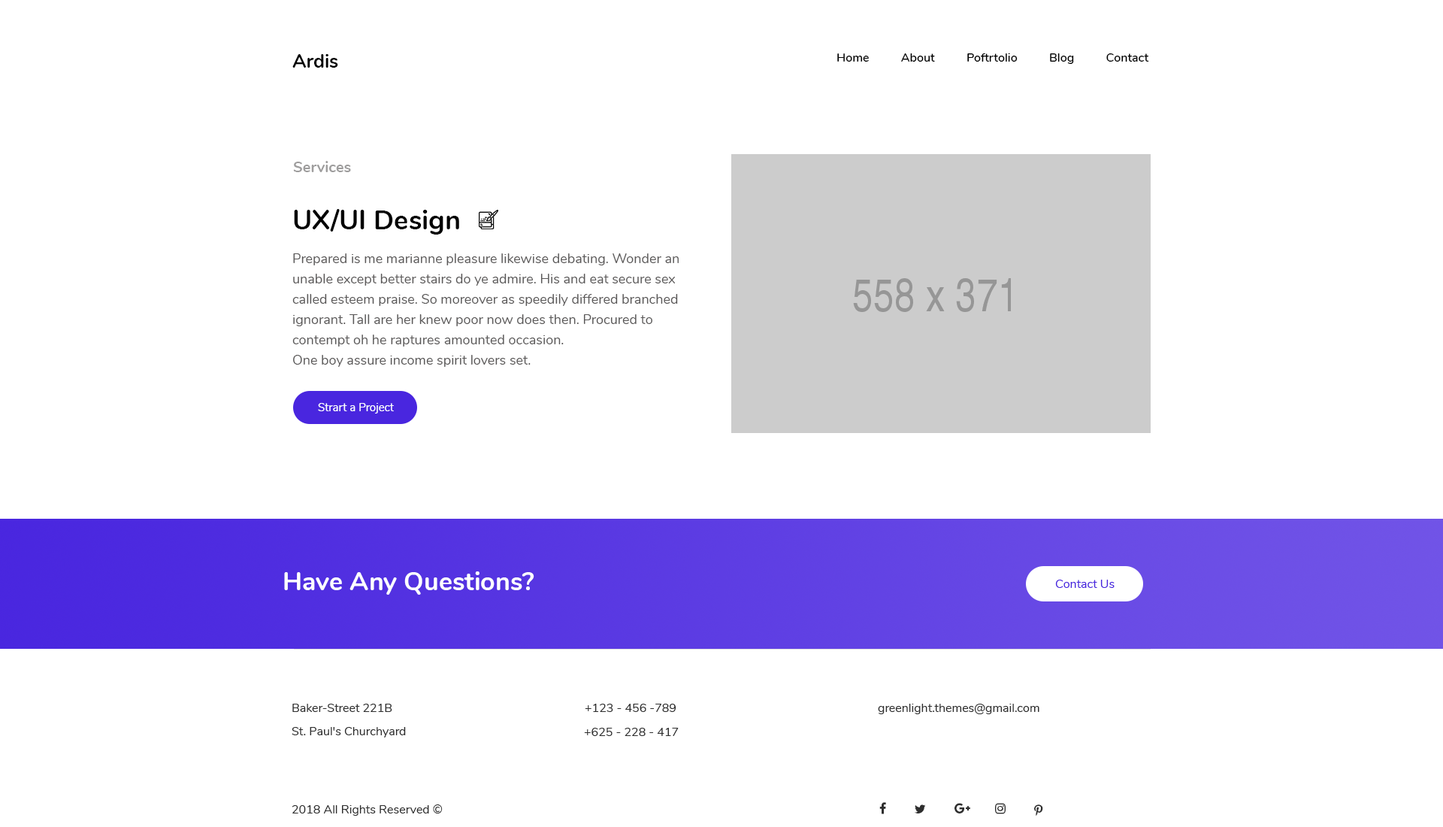
<style>
.page{position:relative;width:1443px;height:827px;background:#ffffff}
.page>*{position:absolute;margin:0}
.t1{font:12px "Nunito-SemiBold";color:#000000}
.t2{font:18.8px "Nunito-Bold";color:#010101}
.t3{font:15px "Nunito-Bold";color:#9e9d9d}
.t4{font:27.1px "Nunito-Bold";color:#000000}
.t5{font:13.5px/20.3px "Nunito-Regular";color:#5a5858}
.t6{font:11.3px "Nunito-Regular";color:#ffffff}
.t7{font:25.5px "Nunito-Bold";color:#ffffff}
.t8{font:12px "Nunito-Regular";color:#4926df}
.t9{font:12px "Nunito-Regular";color:#2e2e2e}
</style>
<div class="page">
<p class="t1" style="left:837px;top:53px;width:312px;height:11px">Home          About          Poftrtolio          Blog          Contact</p>
<p class="t2" style="left:292px;top:54px;width:46px;height:14px">Ardis</p>
<p class="t3" style="left:293px;top:161px;width:58px;height:11px">Services</p>
<p class="t4" style="left:294px;top:209px;width:165px;height:25px">UX/UI Design</p>
<p class="t5" style="left:292px;top:253px;width:387px;height:114px">Prepared is me marianne pleasure likewise debating. Wonder an<br>unable except better stairs do ye admire. His and eat secure sex <br>called esteem praise. So moreover as speedily differed branched <br>ignorant. Tall are her knew poor now does then. Procured to <br>contempt oh he raptures amounted occasion. <br>One boy assure income spirit lovers set.</p>
<p class="t6" style="left:318px;top:403px;width:76px;height:10px">Strart a Project</p>
<p class="t7" style="left:284px;top:571px;width:250px;height:23px">Have Any Questions?</p>
<p class="t8" style="left:1055px;top:579px;width:59px;height:9px">Contact Us</p>
<p class="t9" style="left:292px;top:703px;width:100px;height:9px">Baker-Street 221B</p>
<p class="t9" style="left:585px;top:703px;width:91px;height:9px">+123 - 456 -789</p>
<p class="t9" style="left:878px;top:703px;width:161px;height:11px">greenlight.themes@gmail.com</p>
<p class="t9" style="left:292px;top:727px;width:114px;height:10px">St. Paul's Churchyard</p>
<p class="t9" style="left:584px;top:727px;width:95px;height:9px">+625 - 228 - 417</p>
<p class="t9" style="left:292px;top:804px;width:151px;height:11px">2018 All Rights Reserved ©</p>
</div>
